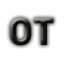
<style>
.page{position:relative;width:64px;height:64px;background:#ffffff}
.page>*{position:absolute;margin:0}
.t1{font:36px "NeoSansPro-Bold"}
</style>
<div class="page">
<p class="t1" style="left:10px;top:18px;width:44px;height:28px">OT</p>
</div>
